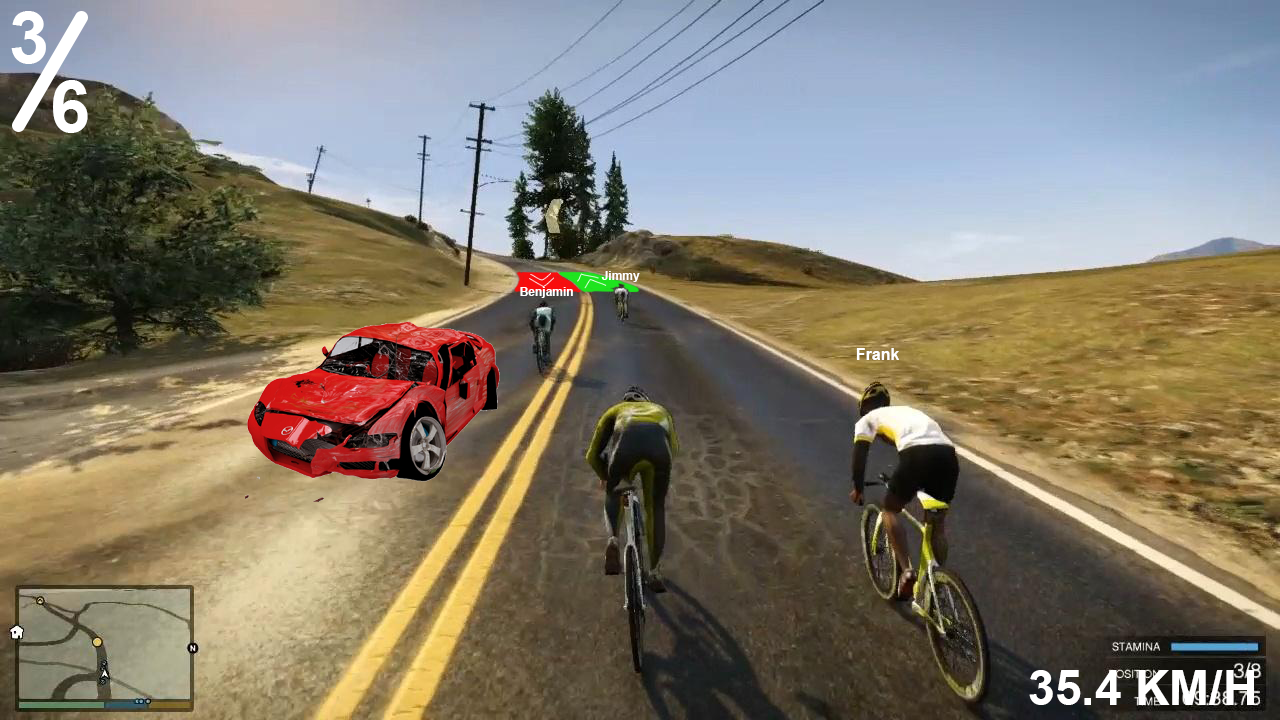
<style>
.page{position:relative;width:1280px;height:720px}
.page>*{position:absolute;margin:0}
.t1{font:72px "Arial-BoldMT";color:#ffffff}
.t2{font:12px "Arial-BoldMT";color:#ffffff}
.t3{font:16px "Arial-BoldMT";color:#ffffff}
.t4{font:48px "Arial-BoldMT";color:#ffffff}
</style>
<div class="page">
<p class="t1" style="left:11px;top:11px;width:35px;height:53px">3</p>
<p class="t1" style="left:53px;top:80px;width:35px;height:53px">6</p>
<p class="t2" style="left:601px;top:271px;width:39px;height:11px">Jimmy</p>
<p class="t2" style="left:520px;top:287px;width:53px;height:11px">Benjamin</p>
<p class="t3" style="left:856px;top:348px;width:43px;height:12px">Frank</p>
<p class="t4" style="left:1029px;top:670px;width:225px;height:35px">35.4 KM/H</p>
</div>
